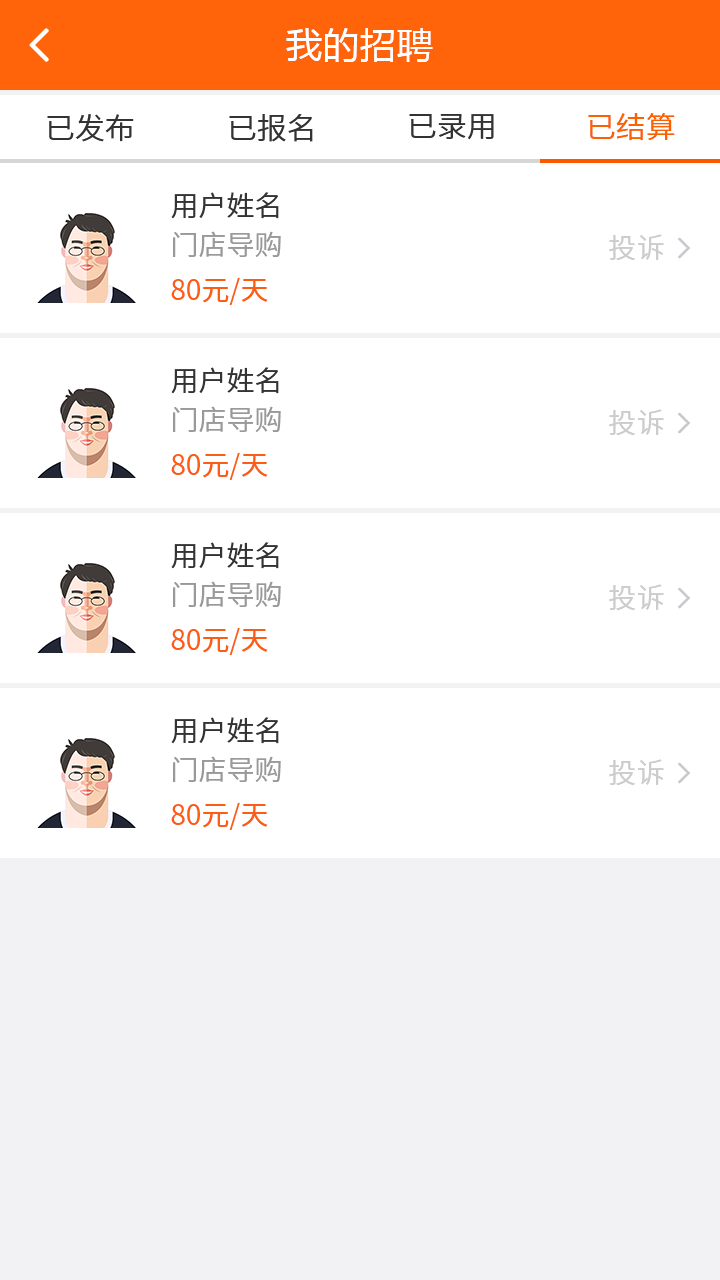
<style>
.page{position:relative;width:720px;height:1280px;background:#ffffff}
.page>*{position:absolute;margin:0}
.t1{font:36px "MicrosoftYaHei";letter-spacing:0.03em;color:#ffffff}
.t2{font:30px "NotoSansCJKsc-DemiLight";color:#333333;font-variant:small-caps}
.t3{font:30px "NotoSansCJKsc-DemiLight";color:#fb6100;font-variant:small-caps}
.t4{font:28px "NotoSansCJKsc-DemiLight";color:#333333;font-variant:small-caps}
.t5{font:28px "NotoSansCJKsc-DemiLight";color:#999999;font-variant:small-caps}
.t6{font:28px "NotoSansCJKsc-DemiLight";letter-spacing:0.03em;color:#cccccc;font-variant:small-caps}
.t7{font:28px "NotoSansCJKsc-Regular";color:#fb5d15;font-variant:small-caps}
</style>
<div class="page">
<p class="t1" style="left:286px;top:28px;width:147px;height:34px">我的招聘</p>
<p class="t2" style="left:409px;top:113px;width:85px;height:27px">已录用</p>
<p class="t3" style="left:588px;top:113px;width:87px;height:28px">已结算</p>
<p class="t2" style="left:47px;top:114px;width:87px;height:28px">已发布</p>
<p class="t2" style="left:229px;top:114px;width:84px;height:28px">已报名</p>
<p class="t4" style="left:171px;top:192px;width:108px;height:27px">用户姓名</p>
<p class="t5" style="left:173px;top:231px;width:108px;height:26px">门店导购</p>
<p class="t6" style="left:609px;top:234px;width:55px;height:27px">投诉</p>
<p class="t7" style="left:171px;top:277px;width:97px;height:28px">80元/天</p>
<p class="t4" style="left:171px;top:367px;width:108px;height:27px">用户姓名</p>
<p class="t5" style="left:173px;top:406px;width:108px;height:26px">门店导购</p>
<p class="t6" style="left:609px;top:409px;width:55px;height:27px">投诉</p>
<p class="t7" style="left:171px;top:452px;width:97px;height:28px">80元/天</p>
<p class="t4" style="left:171px;top:542px;width:108px;height:27px">用户姓名</p>
<p class="t5" style="left:173px;top:581px;width:108px;height:26px">门店导购</p>
<p class="t6" style="left:609px;top:584px;width:55px;height:27px">投诉</p>
<p class="t7" style="left:171px;top:627px;width:97px;height:28px">80元/天</p>
<p class="t4" style="left:171px;top:717px;width:108px;height:27px">用户姓名</p>
<p class="t5" style="left:173px;top:756px;width:108px;height:26px">门店导购</p>
<p class="t6" style="left:609px;top:759px;width:55px;height:27px">投诉</p>
<p class="t7" style="left:171px;top:802px;width:97px;height:28px">80元/天</p>
</div>
